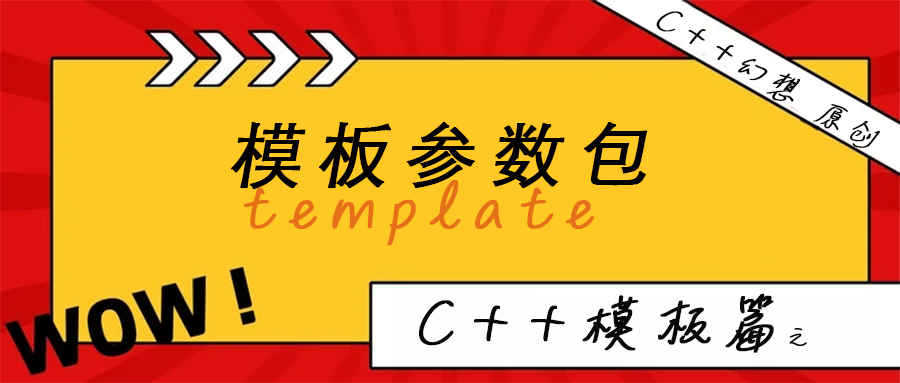
<style>
.page{position:relative;width:900px;height:383px;background:#ffc825}
.page>*{position:absolute;margin:0}
.t1{font:37px "MLingWaiMedium-SC";letter-spacing:0.2em;color:#080808;font-weight:bold;font-style:italic}
.t2{font:33.3px "MLingWaiMedium-SC";letter-spacing:0.2em;color:#080808;font-weight:bold;font-style:italic}
.t3{font:70.7px "STHeitiSC-Light";letter-spacing:0.2em;color:#030001;font-weight:bold;font-style:italic}
.t4{font:71.8px "MLingWaiMedium-SC";letter-spacing:0.2em;color:#e67017;font-weight:bold;font-style:italic}
.t5{font:65.8px "MLingWaiMedium-SC";letter-spacing:0.2em;color:#080808;font-weight:bold;font-style:italic}
.t6{font:29.7px "MLingWaiMedium-SC";letter-spacing:0.2em;color:#080808;font-weight:bold;font-style:italic}
</style>
<div class="page">
<p class="t1" style="left:656px;top:11px;width:225px;height:137px;rotate:30deg">C++幻想 <span class="t2">原创</span></p>
<p class="t3" style="left:231px;top:122px;width:417px;height:67px">模板参数包</p>
<p class="t4" style="left:244px;top:180px;width:350px;height:66px">template</p>
<p class="t5" style="left:419px;top:293px;width:388px;height:60px">C++模板篇<span class="t6">之</span></p>
</div>
